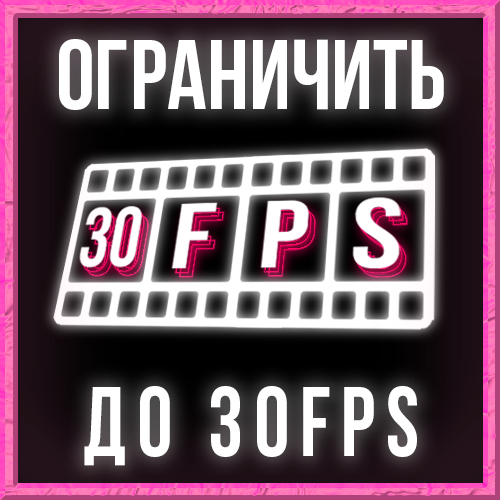
<style>
.page{position:relative;width:500px;height:500px}
.page>*{position:absolute;margin:0}
.t1{font:98px "BebasNeueBold";color:#ffffff}
.t2{font:98px "BebasNeueBold";letter-spacing:0.12em;color:#ffffff;scale:0.91 1}
</style>
<div class="page">
<p class="t1" style="left:59px;top:39px;width:385px;height:71px">ограничить</p>
<p class="t2" style="left:84px;top:386px;width:333px;height:80px">до 30FPS</p>
</div>
